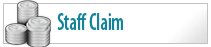
<style>
.page{position:relative;width:211px;height:47px;background:#ffffff}
.page>*{position:absolute;margin:0}
.t1{font:24px "MyriadPro-SemiboldCond";color:#11839a;scale:0.78 1}
</style>
<div class="page">
<p class="t1" style="left:57px;top:13px;width:66px;height:17px">Staff Claim</p>
</div>
